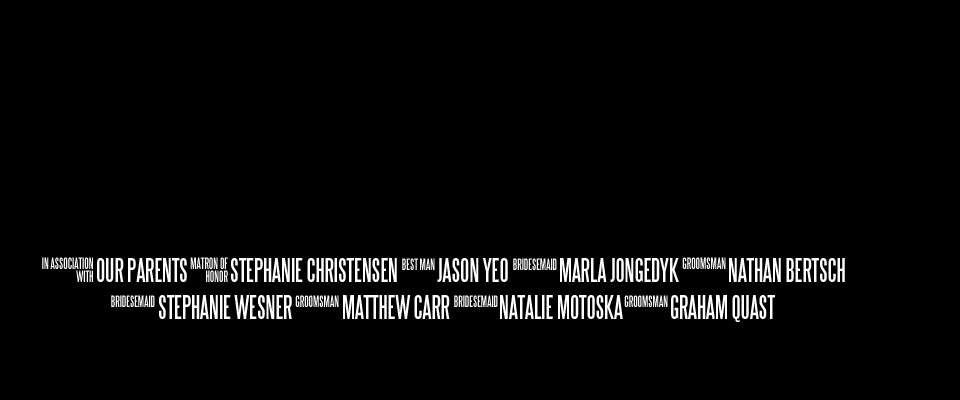
<style>
.page{position:relative;width:960px;height:400px;background:#000000}
.page>*{position:absolute;margin:0}
.t1{font:14.6px/12.9px "SteelTongs";color:#ffffff}
.t2{font:14.6px "SteelTongs";color:#ffffff}
.t3{font:30px "SteelTongs";color:#ffffff}
</style>
<div class="page">
<p class="t1" style="left:42px;top:257px;width:51px;height:25px;text-align:right">IN ASSOCIATION<br>WITH</p>
<p class="t1" style="left:190px;top:257px;width:38px;height:25px;text-align:right">MATRON OF<br>HONOR</p>
<p class="t2" style="left:682px;top:257px;width:44px;height:12px">GROOMSMAN</p>
<p class="t3" style="left:97px;top:258px;width:90px;height:24px">OUR PARENTS</p>
<p class="t3" style="left:231px;top:258px;width:166px;height:24px">STEPHANIE CHRISTENSEN</p>
<p class="t2" style="left:402px;top:258px;width:33px;height:12px">BEST MAN</p>
<p class="t3" style="left:437px;top:258px;width:71px;height:24px">JASON YEO</p>
<p class="t2" style="left:513px;top:258px;width:44px;height:12px">BRIDESEMAID</p>
<p class="t3" style="left:560px;top:258px;width:119px;height:24px">MARLA JONGEDYK</p>
<p class="t3" style="left:729px;top:258px;width:116px;height:24px">NATHAN BERTSCH</p>
<p class="t2" style="left:111px;top:295px;width:44px;height:12px">BRIDESEMAID</p>
<p class="t3" style="left:159px;top:295px;width:133px;height:24px">STEPHANIE WESNER</p>
<p class="t2" style="left:295px;top:295px;width:44px;height:12px">GROOMSMAN</p>
<p class="t3" style="left:343px;top:295px;width:107px;height:24px">MATTHEW CARR</p>
<p class="t2" style="left:454px;top:295px;width:44px;height:12px">BRIDESEMAID</p>
<p class="t3" style="left:500px;top:295px;width:123px;height:24px">NATALIE MOTOSKA</p>
<p class="t2" style="left:624px;top:295px;width:44px;height:12px">GROOMSMAN</p>
<p class="t3" style="left:671px;top:295px;width:104px;height:27px">GRAHAM QUAST</p>
</div>
